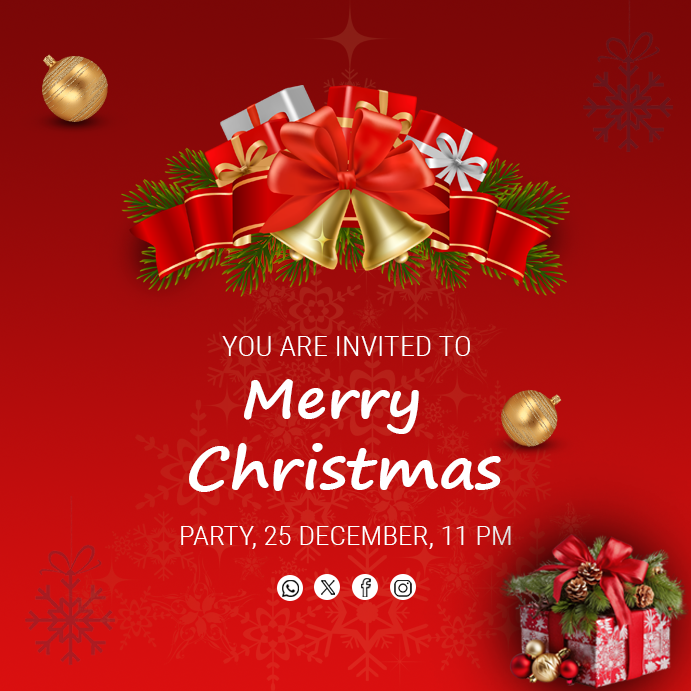
<style>
.page{position:relative;width:691px;height:691px}
.page>*{position:absolute;margin:0}
.t1{font:28.2px "RobotoCondensed-Light";color:#ffffff;scale:1.08 1}
.t2{font:54.4px "SegoePrint-Bold";color:#ffffff;scale:1.08 1}
.t3{font:58.4px "SegoePrint-Bold";color:#ffffff;scale:1.08 1}
.t4{font:27.1px "RobotoCondensed-Light";color:#ffffff;scale:1.08 1}
</style>
<div class="page">
<p class="t1" style="left:222px;top:336px;width:248px;height:20px">YOU ARE INVITED TO</p>
<p class="t2" style="left:244px;top:379px;width:175px;height:55px">Merry</p>
<p class="t3" style="left:189px;top:443px;width:312px;height:49px">Christmas</p>
<p class="t4" style="left:181px;top:526px;width:330px;height:23px">PARTY, 25 DECEMBER, 11 PM</p>
</div>
